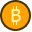
<style>
.page{position:relative;width:32px;height:32px;background:#ffa200}
.page>*{position:absolute;margin:0}
.t1{font:18px "Tahoma";color:#fff29c}
</style>
<div class="page">
<p class="t1" style="left:11px;top:9px;width:10px;height:13px">B</p>
</div>
